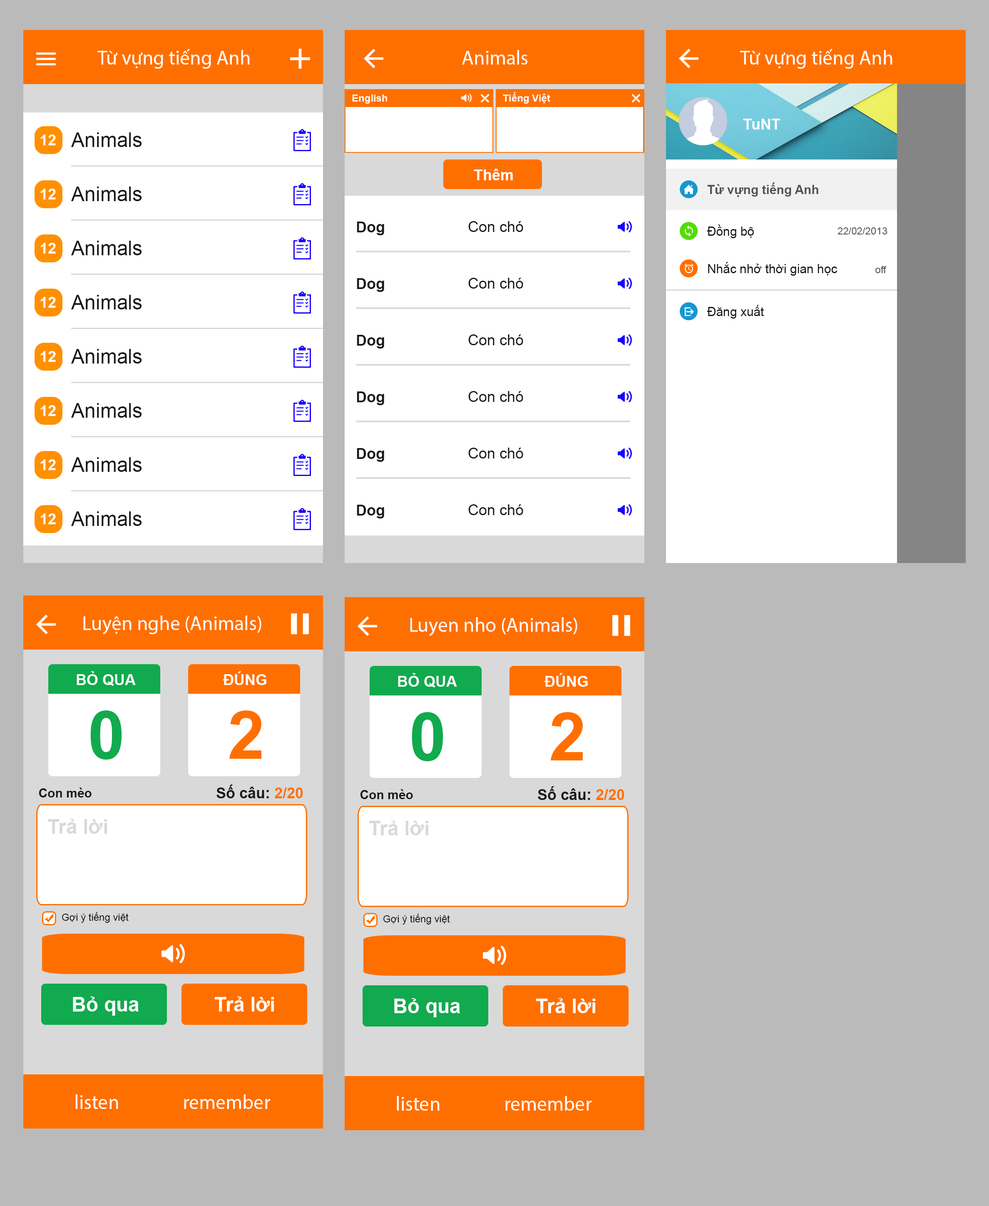
<style>
.page{position:relative;width:989px;height:1206px;background:#ffffff}
.page>*{position:absolute;margin:0}
.t1{font:20px "MyriadPro-Regular";color:#ffffff}
.t2{font:10px "Arial-BoldMT";color:#ffffff}
.t3{font:15px "Arial-BoldMT";color:#ffffff}
.t4{font:12.5px "Arial-BoldMT";color:#515151}
.t5{font:12.5px "ArialMT";color:#191919}
.t6{font:10px "ArialMT";color:#515151}
.t7{font:66.6px "Arial-BoldMT";color:#11aa4e}
.t8{font:66.6px "Arial-BoldMT";color:#ff6f00}
.t9{font:15px "Arial-BoldMT";color:#191919}
.t10{font:15px "Arial-BoldMT";color:#ff6f00}
.t11{font:12.5px "Arial-BoldMT";color:#191919}
.t12{font:20px "Arial-BoldMT";color:#d9d9d9}
.t13{font:9.9px "ArialMT";color:#191919}
.t14{font:20px "Arial-BoldMT";color:#ffffff}
</style>
<div class="page">
<p class="t1" style="left:97px;top:49px;width:153px;height:20px">Từ vựng tiếng Anh</p>
<p class="t1" style="left:462px;top:50px;width:65px;height:15px">Animals</p>
<p class="t1" style="left:740px;top:49px;width:153px;height:20px">Từ vựng tiếng Anh</p>
<p class="t2" style="left:352px;top:94px;width:35px;height:10px">English</p>
<p class="t2" style="left:503px;top:92px;width:47px;height:12px">Tiếng Việt</p>
<p class="t3" style="left:743px;top:119px;width:38px;height:10px">TuNT</p>
<p class="t3" style="left:474px;top:169px;width:39px;height:11px">Thêm</p>
<p class="t4" style="left:707px;top:182px;width:111px;height:15px">Từ vựng tiếng Anh</p>
<p class="t5" style="left:707px;top:224px;width:47px;height:14px">Đồng bộ</p>
<p class="t6" style="left:838px;top:227px;width:50px;height:7px">22/02/2013</p>
<p class="t5" style="left:708px;top:262px;width:130px;height:14px">Nhắc nhở thời gian học</p>
<p class="t6" style="left:875px;top:266px;width:12px;height:7px">off</p>
<p class="t5" style="left:707px;top:305px;width:57px;height:13px">Đăng xuất</p>
<p class="t1" style="left:83px;top:615px;width:178px;height:19px">Luyện nghe (Animals)</p>
<p class="t1" style="left:410px;top:617px;width:167px;height:19px">Luyen nho (Animals)</p>
<p class="t3" style="left:77px;top:671px;width:59px;height:15px">BỎ QUA</p>
<p class="t3" style="left:223px;top:671px;width:43px;height:14px">ĐÚNG</p>
<p class="t3" style="left:398px;top:673px;width:59px;height:14px">BỎ QUA</p>
<p class="t3" style="left:545px;top:673px;width:43px;height:13px">ĐÚNG</p>
<p class="t7" style="left:90px;top:710px;width:32px;height:49px">0</p>
<p class="t8" style="left:229px;top:710px;width:32px;height:48px">2</p>
<p class="t7" style="left:412px;top:712px;width:31px;height:49px">0</p>
<p class="t8" style="left:551px;top:712px;width:32px;height:48px">2</p>
<p class="t9" style="left:216px;top:784px;width:87px;height:14px">Số câu: <span class="t10">2/20</span></p>
<p class="t9" style="left:538px;top:786px;width:86px;height:14px">Số câu: <span class="t10">2/20</span></p>
<p class="t11" style="left:39px;top:787px;width:53px;height:10px">Con mèo</p>
<p class="t11" style="left:360px;top:789px;width:53px;height:10px">Con mèo</p>
<p class="t12" style="left:48px;top:818px;width:59px;height:15px">Trả lời</p>
<p class="t12" style="left:369px;top:820px;width:59px;height:15px">Trả lời</p>
<p class="t13" style="left:62px;top:912px;width:67px;height:10px">Gợi ý tiếng việt</p>
<p class="t13" style="left:383px;top:913px;width:67px;height:11px">Gợi ý tiếng việt</p>
<p class="t14" style="left:73px;top:996px;width:66px;height:19px">Bỏ qua</p>
<p class="t14" style="left:215px;top:996px;width:59px;height:15px">Trả lời</p>
<p class="t14" style="left:394px;top:998px;width:66px;height:19px">Bỏ qua</p>
<p class="t14" style="left:536px;top:998px;width:59px;height:15px">Trả lời</p>
<p class="t1" style="left:75px;top:1094px;width:196px;height:15px">listen               remember</p>
<p class="t1" style="left:397px;top:1096px;width:195px;height:14px">listen               remember</p>
</div>
